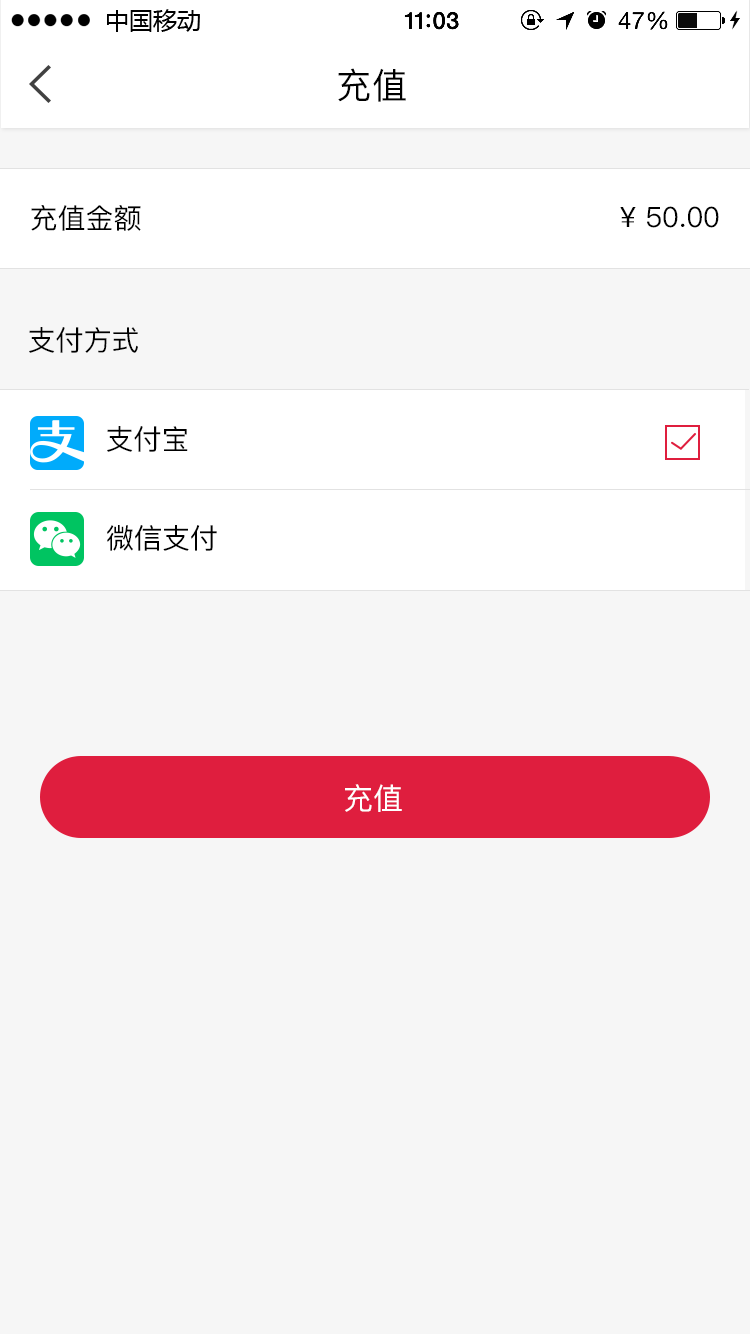
<style>
.page{position:relative;width:750px;height:1334px;background:#f6f6f6}
.page>*{position:absolute;margin:0}
.t1{font:35.7px "PingFang-SC-Medium";color:#000000}
.t2{font:28px "PingFang-SC-Medium";color:#000000}
.t3{font:30px "PingFang-SC-Medium";color:#ffffff}
</style>
<div class="page">
<p class="t1" style="left:338px;top:68px;width:68px;height:34px">充值</p>
<p class="t2" style="left:31px;top:205px;width:110px;height:26px">充值金额</p>
<p class="t2" style="left:620px;top:206px;width:99px;height:22px">¥ 50.00</p>
<p class="t2" style="left:29px;top:327px;width:109px;height:26px">支付方式</p>
<p class="t2" style="left:107px;top:426px;width:81px;height:26px">支付宝</p>
<p class="t2" style="left:107px;top:525px;width:110px;height:26px">微信支付</p>
<p class="t3" style="left:345px;top:784px;width:57px;height:28px">充值</p>
</div>
